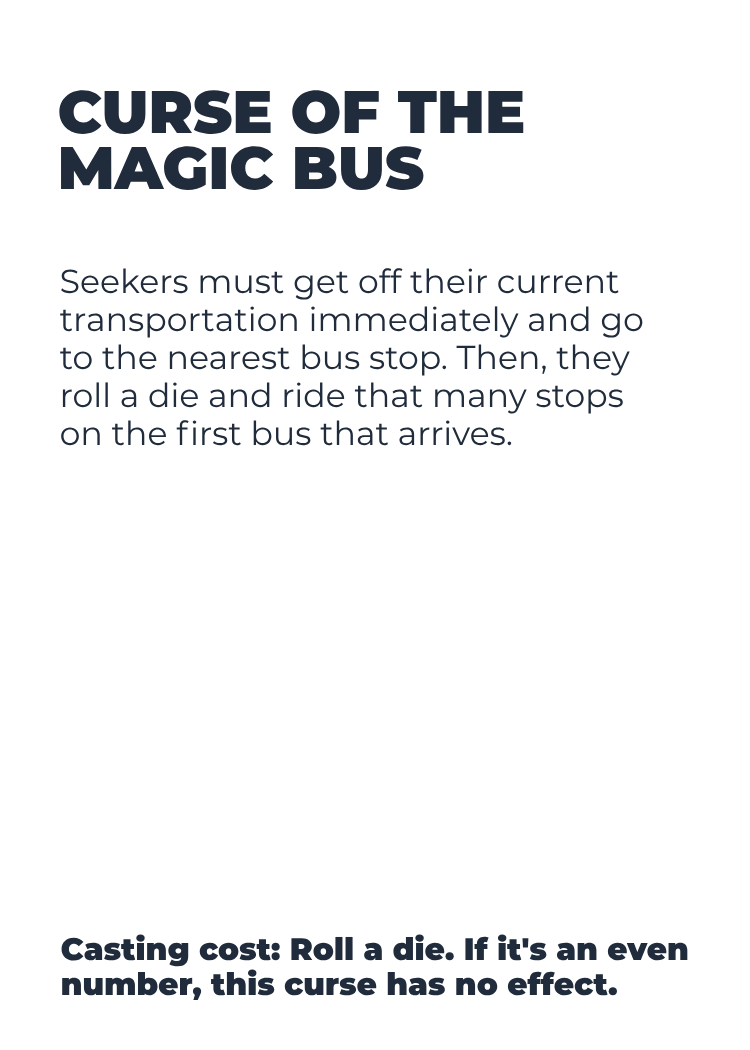
<style>
.page{position:relative;width:750px;height:1050px;background:#ffffff}
.page>*{position:absolute;margin:0}
.t1{font:59.8px/56.4px "Montserrat-Black";color:#202c3c}
.t2{font:33.1px/38px "Montserrat-Regular";color:#202c3c}
.t3{font:31.1px/35.6px "Montserrat-Black";color:#202c3c}
</style>
<div class="page">
<p class="t1" style="left:59px;top:90px;width:465px;height:100px">CURSE OF THE<br>MAGIC BUS</p>
<p class="t2" style="left:60px;top:268px;width:583px;height:178px">Seekers must get off their current<br>transportation immediately and go<br>to the nearest bus stop. Then, they<br>roll a die and ride that many stops<br>on the first bus that arrives.</p>
<p class="t3" style="left:61px;top:934px;width:627px;height:66px">Casting cost: Roll a die. If it's an even<br>number, this curse has no effect.</p>
</div>
